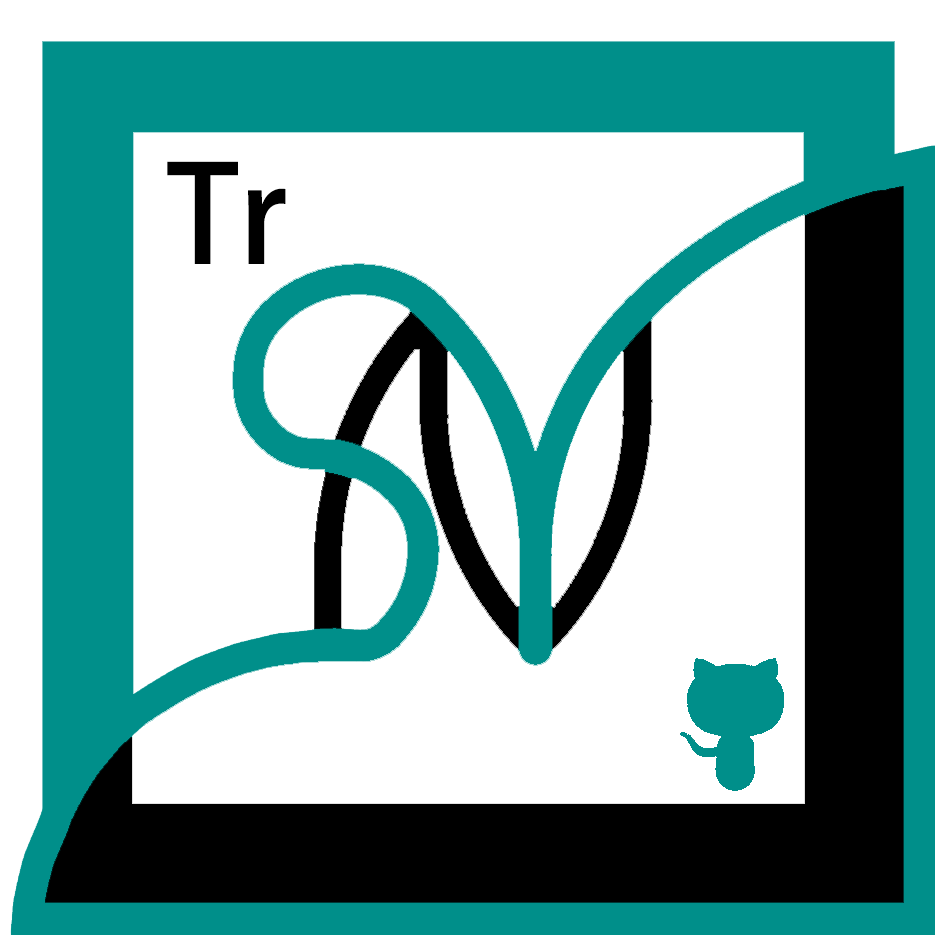
<style>
.page{position:relative;width:935px;height:935px;background:#ffffff}
.page>*{position:absolute;margin:0}
.t1{font:133.3px "AdobeHeitiStd-Regular";color:#000000}
</style>
<div class="page">
<p class="t1" style="left:167px;top:161px;width:119px;height:103px">Tr</p>
</div>
